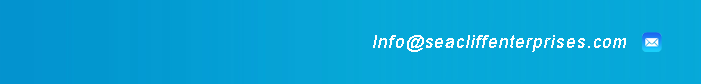
<style>
.page{position:relative;width:701px;height:84px;background:#06a8d9}
.page>*{position:absolute;margin:0}
.t1{font:18px "ArialMT";letter-spacing:0.05em;color:#ffffff;font-style:italic}
</style>
<div class="page">
<p class="t1" style="left:373px;top:35px;width:253px;height:17px">Info@seacliffenterprises.com</p>
</div>
